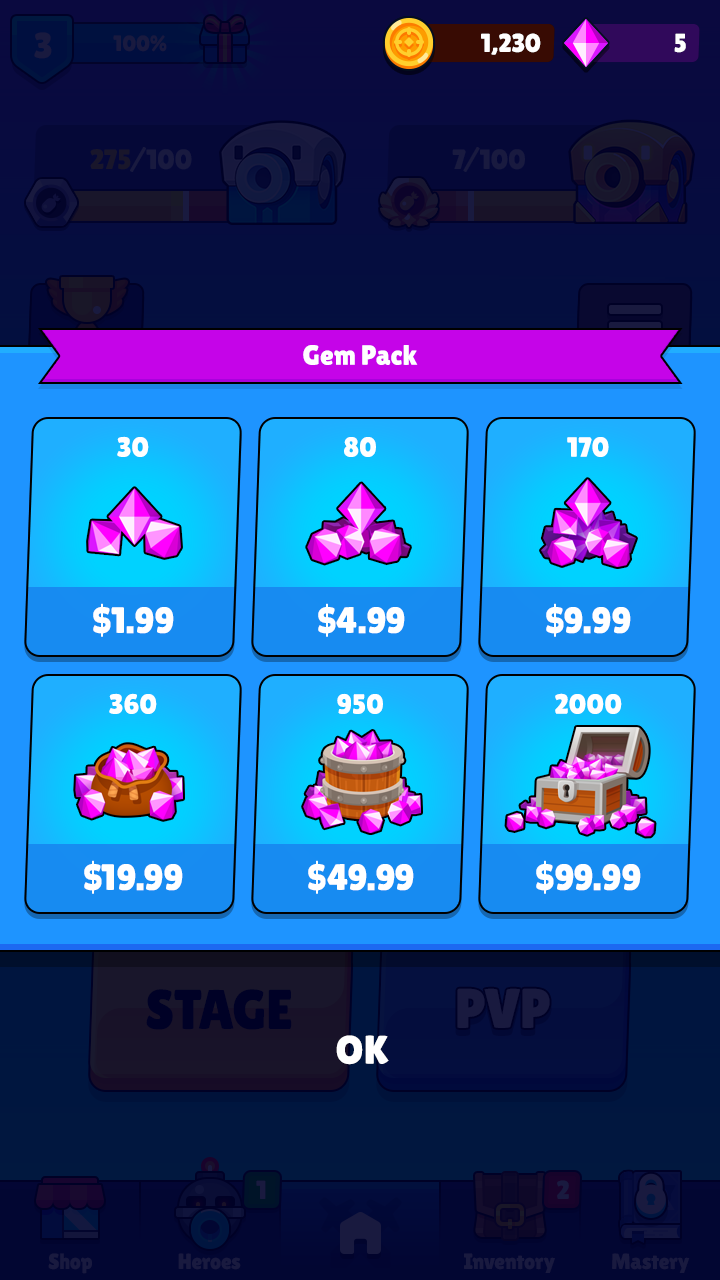
<style>
.page{position:relative;width:720px;height:1280px}
.page>*{position:absolute;margin:0}
.t1{font:26px "LilitaOne";letter-spacing:-0.01em;color:#ffffff;text-transform:uppercase}
.t2{font:28px "LilitaOne";color:#ffffff}
.t3{font:36.7px "LilitaOne";color:#ffffff}
.t4{font:40px "LilitaOne";color:#ffffff}
</style>
<div class="page">
<p class="t1" style="left:481px;top:33px;width:60px;height:22px">1,230</p>
<p class="t1" style="left:674px;top:33px;width:12px;height:20px">5</p>
<p class="t2" style="left:303px;top:345px;width:115px;height:20px">Gem Pack</p>
<p class="t2" style="left:117px;top:436px;width:32px;height:21px">30</p>
<p class="t2" style="left:344px;top:437px;width:32px;height:20px">80</p>
<p class="t2" style="left:567px;top:437px;width:42px;height:20px">170</p>
<p class="t3" style="left:93px;top:603px;width:81px;height:34px">$1.99</p>
<p class="t3" style="left:318px;top:603px;width:87px;height:34px">$4.99</p>
<p class="t3" style="left:546px;top:603px;width:85px;height:34px">$9.99</p>
<p class="t2" style="left:109px;top:693px;width:48px;height:21px">360</p>
<p class="t2" style="left:337px;top:693px;width:46px;height:21px">950</p>
<p class="t2" style="left:555px;top:693px;width:67px;height:21px">2000</p>
<p class="t3" style="left:84px;top:860px;width:99px;height:34px">$19.99</p>
<p class="t3" style="left:308px;top:860px;width:106px;height:34px">$49.99</p>
<p class="t3" style="left:536px;top:860px;width:105px;height:34px">$99.99</p>
<p class="t4" style="left:336px;top:1035px;width:53px;height:30px">OK</p>
</div>
